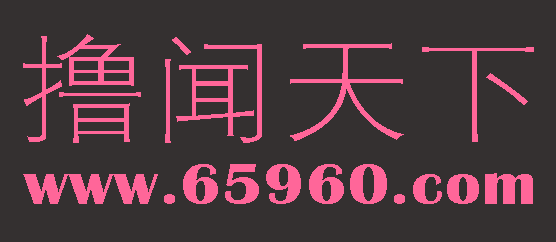
<style>
.page{position:relative;width:556px;height:242px;background:#343030}
.page>*{position:absolute;margin:0}
.t1{font:120px "FZXDXJW--GB1-0";color:#ff6699;scale:1.1 1}
.t2{font:60px "BritannicBold";letter-spacing:0.025em;color:#ff6699;scale:1.1 1}
</style>
<div class="page">
<p class="t1" style="left:23px;top:34px;width:511px;height:109px">撸闻天下</p>
<p class="t2" style="left:23px;top:164px;width:510px;height:40px">www.65960.com</p>
</div>
